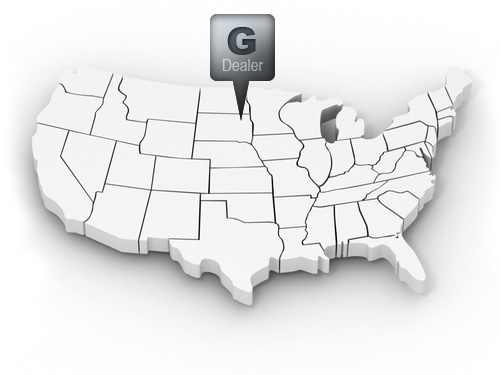
<style>
.page{position:relative;width:500px;height:375px}
.page>*{position:absolute;margin:0}
.t1{font:37.5px "Arial-Black";letter-spacing:0.01em;color:#394249}
.t2{font:16.7px "ArialNarrow";letter-spacing:0.01em;color:#bdbdbd}
</style>
<div class="page">
<p class="t1" style="left:227px;top:27px;width:29px;height:28px">G</p>
<p class="t2" style="left:222px;top:59px;width:42px;height:12px">Dealer</p>
<p class="t2" style="left:222px;top:59px;width:42px;height:12px">Dealer</p>
</div>
